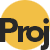
<style>
.page{position:relative;width:50px;height:50px;background:#f2bf45}
.page>*{position:absolute;margin:0}
.t1{font:33.3px "AvenirLTStd-Black";letter-spacing:-0.1em;color:#282828}
</style>
<div class="page">
<p class="t1" style="left:0px;top:18px;width:49px;height:32px">Proj</p>
</div>
